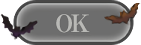
<style>
.page{position:relative;width:141px;height:45px}
.page>*{position:absolute;margin:0}
.t1{font:24px "RyuminPro-ExBold";letter-spacing:-0.08em;color:#b9b9b6}
</style>
<div class="page">
<p class="t1" style="left:56px;top:14px;width:34px;height:19px">OK</p>
</div>
